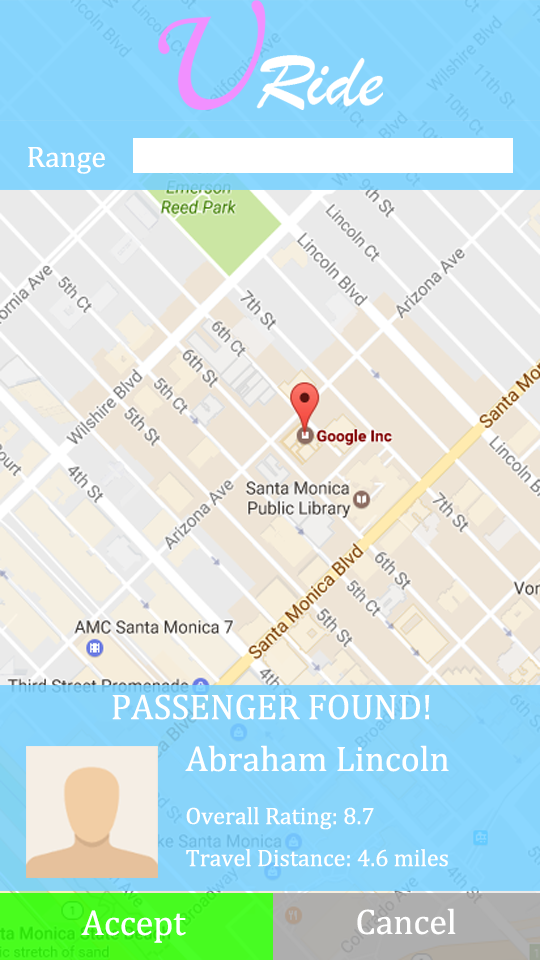
<style>
.page{position:relative;width:540px;height:960px}
.page>*{position:absolute;margin:0}
.t1{font:30px "CambriaMath";color:#ffffff}
.t2{font:36px "CambriaMath";color:#ffffff}
.t3{font:24px "CambriaMath";color:#ffffff}
</style>
<div class="page">
<p class="t1" style="left:28px;top:147px;width:77px;height:27px">Range</p>
<p class="t2" style="left:112px;top:694px;width:318px;height:26px">PASSENGER FOUND!</p>
<p class="t3" style="left:185px;top:745px;width:264px;height:122px"><span class="t2">Abraham Lincoln<br></span>Overall Rating: 8.7<br>Travel Distance: 4.6 miles</p>
<p class="t2" style="left:81px;top:910px;width:105px;height:33px">Accept</p>
<p class="t2" style="left:357px;top:908px;width:99px;height:27px">Cancel</p>
</div>
